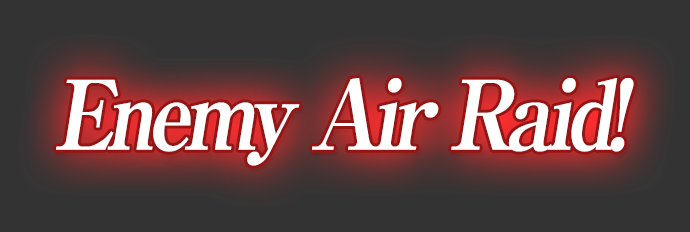
<style>
.page{position:relative;width:690px;height:232px;background:#333333}
.page>*{position:absolute;margin:0}
.t1{font:96px "RyuminPro-ExBold";letter-spacing:-0.08em;color:#ffffff;font-style:italic;scale:0.9 1}
</style>
<div class="page">
<p class="t1" style="left:56px;top:78px;width:578px;height:88px">Enemy Air Raid!</p>
</div>
